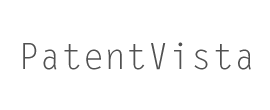
<style>
.page{position:relative;width:270px;height:110px;background:#ffffff}
.page>*{position:absolute;margin:0}
.t1{font:36px "LetterGothicStd";color:#515151}
</style>
<div class="page">
<p class="t1" style="left:23px;top:42px;width:228px;height:28px">PatentVista</p>
</div>
